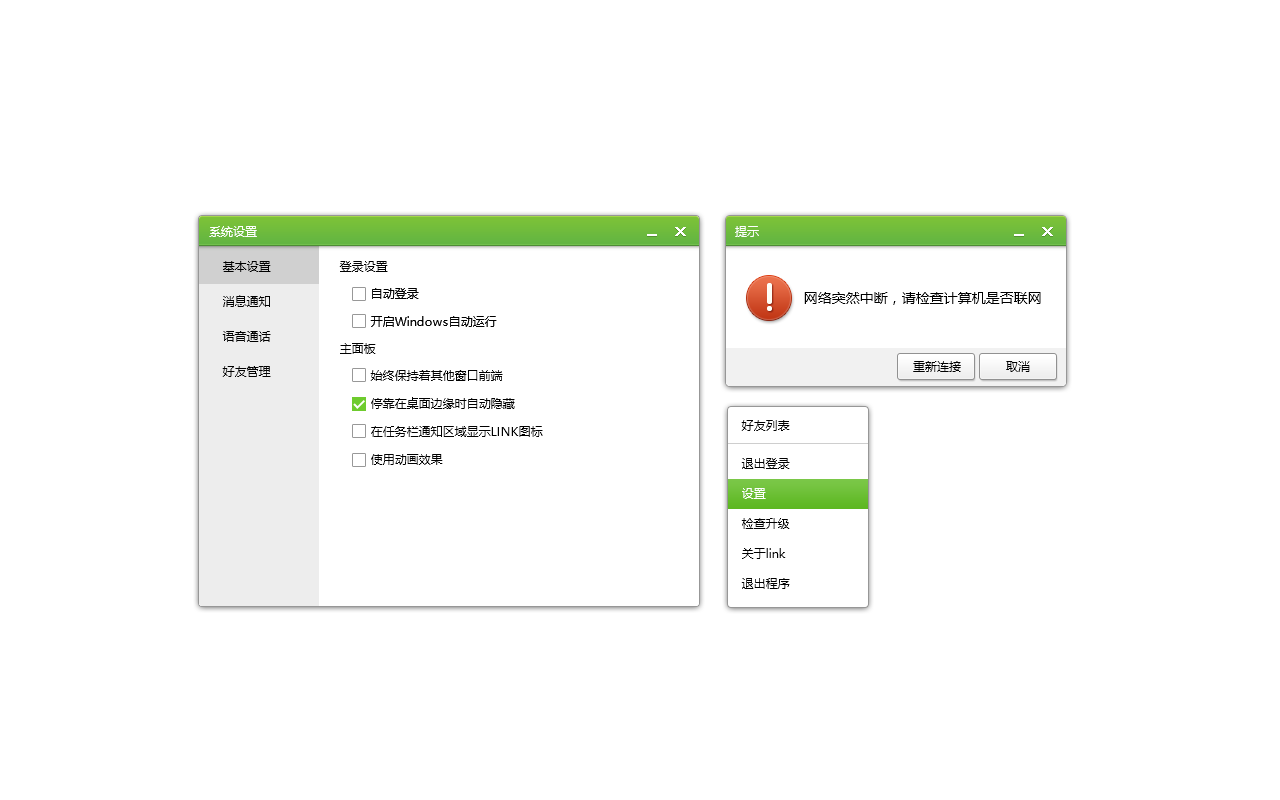
<style>
.page{position:relative;width:1280px;height:800px;background:#ffffff}
.page>*{position:absolute;margin:0}
.t1{font:12px "MicrosoftYaHei";color:#ffffff}
.t2{font:12px/35px "MicrosoftYaHei";color:#000000}
.t3{font:12px "MicrosoftYaHei";color:#000000}
.t4{font:12px/28px "MicrosoftYaHei";color:#000000}
.t5{font:14px "MicrosoftYaHei";color:#000000}
.t6{font:12px/30px "MicrosoftYaHei";color:#000000}
.t7{font:12px/30px "MicrosoftYaHei";color:#ffffff}
</style>
<div class="page">
<p class="t1" style="left:209px;top:226px;width:48px;height:11px">系统设置</p>
<p class="t1" style="left:735px;top:226px;width:24px;height:11px">提示</p>
<p class="t2" style="left:222px;top:261px;width:49px;height:116px">基本设置<br>消息通知<br>语音通话<br>好友管理</p>
<p class="t3" style="left:339px;top:261px;width:49px;height:11px">登录设置</p>
<p class="t4" style="left:370px;top:288px;width:127px;height:39px">自动登录<br>开启Windows自动运行</p>
<p class="t5" style="left:804px;top:292px;width:237px;height:13px">网络突然中断，请检查计算机是否联网</p>
<p class="t3" style="left:340px;top:343px;width:36px;height:11px">主面板</p>
<p class="t3" style="left:913px;top:361px;width:48px;height:11px">重新连接</p>
<p class="t3" style="left:1006px;top:361px;width:24px;height:11px">取消</p>
<p class="t4" style="left:370px;top:370px;width:173px;height:95px">始终保持着其他窗口前端<br>停靠在桌面边缘时自动隐藏<br>在任务栏通知区域显示LINK图标<br>使用动画效果</p>
<p class="t3" style="left:741px;top:420px;width:49px;height:11px">好友列表</p>
<p class="t6" style="left:741px;top:458px;width:49px;height:131px">退出登录<br><span class="t7">设置<br></span>检查升级<br>关于link<br>退出程序</p>
</div>
